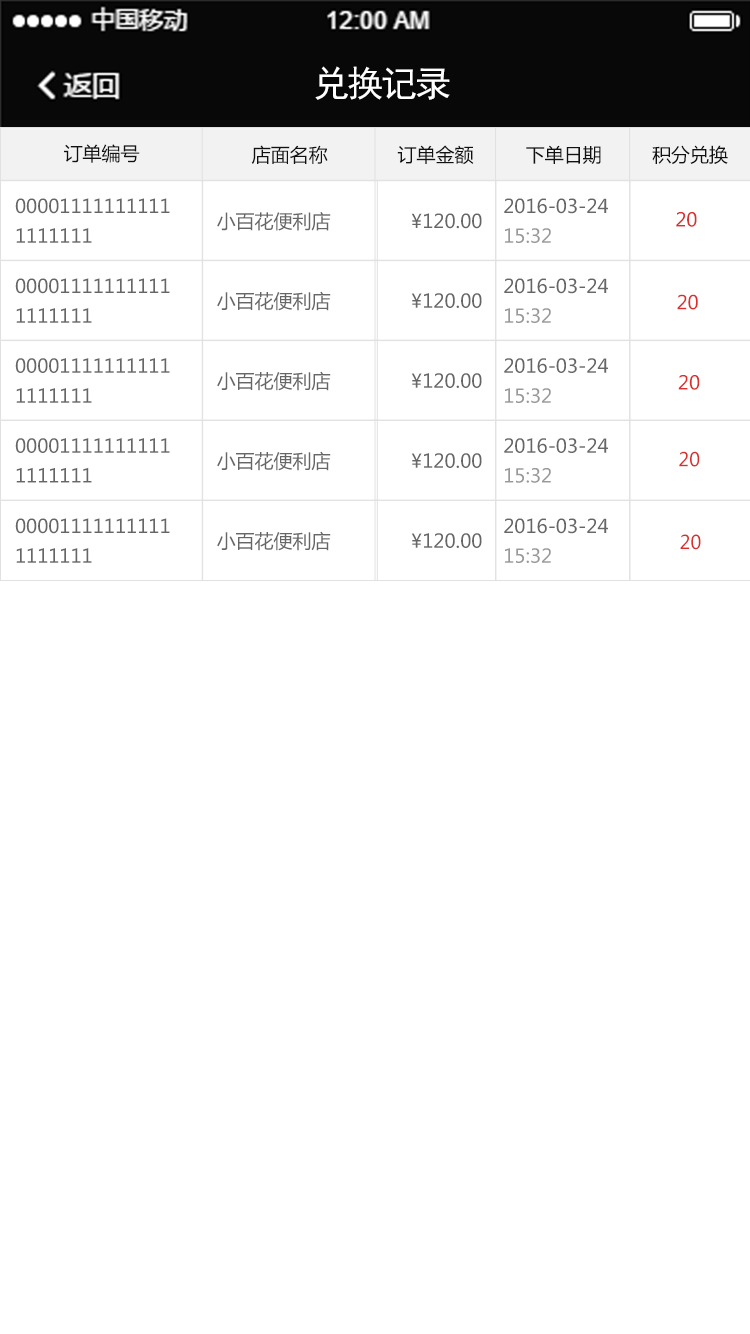
<style>
.page{position:relative;width:750px;height:1334px;background:#ffffff}
.page>*{position:absolute;margin:0}
.t1{font:36px "SimHei";letter-spacing:-0.06em;color:#ffffff}
.t2{font:19px "MicrosoftYaHei";color:#111111}
.t3{font:19px/29.8px "MicrosoftYaHei";color:#666666}
.t4{font:19px/29.8px "MicrosoftYaHei";color:#999999}
.t5{font:19px "MicrosoftYaHei";color:#666666}
.t6{font:19px "MicrosoftYaHei";color:#db2e2e}
.t7{font:18.9px "MicrosoftYaHei";color:#db2e2e}
</style>
<div class="page">
<p class="t1" style="left:315px;top:66px;width:135px;height:34px">兑换记录</p>
<p class="t2" style="left:64px;top:144px;width:76px;height:19px">订单编号</p>
<p class="t2" style="left:251px;top:145px;width:77px;height:19px">店面名称</p>
<p class="t2" style="left:397px;top:145px;width:77px;height:20px">订单金额</p>
<p class="t2" style="left:526px;top:145px;width:75px;height:19px">下单日期</p>
<p class="t2" style="left:652px;top:145px;width:76px;height:19px">积分兑换</p>
<p class="t3" style="left:15px;top:198px;width:155px;height:45px">00001111111111<br>1111111</p>
<p class="t3" style="left:504px;top:198px;width:104px;height:45px">2016-03-24<br><span class="t4">15:32</span></p>
<p class="t5" style="left:217px;top:212px;width:114px;height:19px">小百花便利店</p>
<p class="t5" style="left:411px;top:213px;width:71px;height:16px">¥120.00</p>
<p class="t6" style="left:676px;top:212px;width:21px;height:15px">20</p>
<p class="t3" style="left:15px;top:278px;width:155px;height:45px">00001111111111<br>1111111</p>
<p class="t3" style="left:504px;top:278px;width:104px;height:45px">2016-03-24<br><span class="t4">15:32</span></p>
<p class="t5" style="left:217px;top:291px;width:114px;height:20px">小百花便利店</p>
<p class="t5" style="left:411px;top:293px;width:71px;height:15px">¥120.00</p>
<p class="t6" style="left:677px;top:294px;width:21px;height:16px">20</p>
<p class="t3" style="left:15px;top:358px;width:155px;height:45px">00001111111111<br>1111111</p>
<p class="t3" style="left:504px;top:358px;width:104px;height:45px">2016-03-24<br><span class="t4">15:32</span></p>
<p class="t5" style="left:217px;top:371px;width:114px;height:20px">小百花便利店</p>
<p class="t5" style="left:411px;top:373px;width:71px;height:15px">¥120.00</p>
<p class="t6" style="left:678px;top:375px;width:22px;height:15px">20</p>
<p class="t3" style="left:15px;top:438px;width:155px;height:45px">00001111111111<br>1111111</p>
<p class="t3" style="left:504px;top:438px;width:104px;height:45px">2016-03-24<br><span class="t4">15:32</span></p>
<p class="t5" style="left:217px;top:451px;width:114px;height:20px">小百花便利店</p>
<p class="t5" style="left:411px;top:453px;width:71px;height:15px">¥120.00</p>
<p class="t7" style="left:679px;top:451px;width:21px;height:16px">20</p>
<p class="t3" style="left:15px;top:518px;width:155px;height:45px">00001111111111<br>1111111</p>
<p class="t3" style="left:504px;top:518px;width:104px;height:45px">2016-03-24<br><span class="t4">15:32</span></p>
<p class="t5" style="left:217px;top:531px;width:114px;height:20px">小百花便利店</p>
<p class="t5" style="left:411px;top:533px;width:71px;height:15px">¥120.00</p>
<p class="t7" style="left:680px;top:534px;width:21px;height:16px">20</p>
</div>
